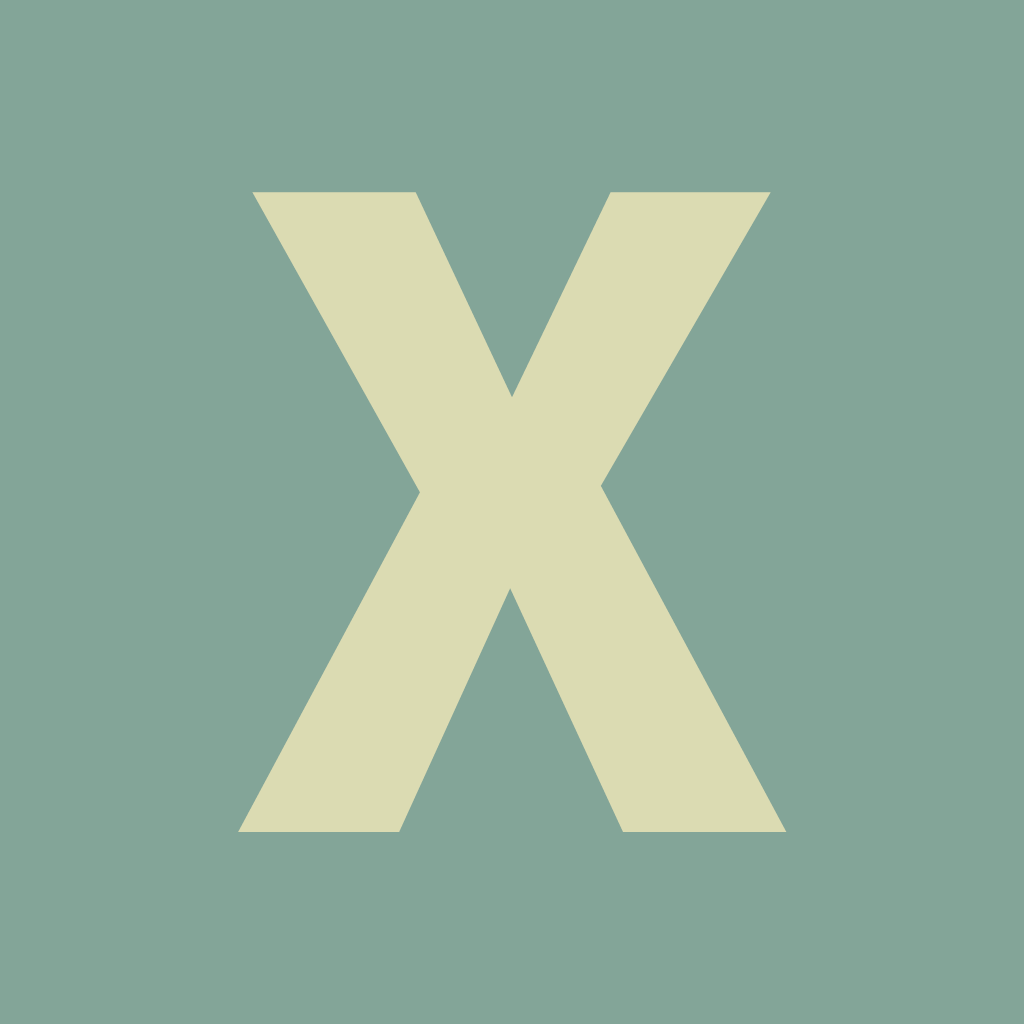
<style>
.page{position:relative;width:1024px;height:1024px;background:#83a598}
.page>*{position:absolute;margin:0}
.t1{font:900px "FiraCode-Bold";color:#dbdbb2}
</style>
<div class="page">
<p class="t1" style="left:238px;top:192px;width:549px;height:640px">X</p>
</div>
